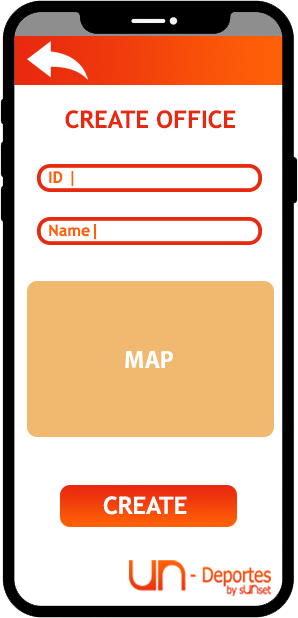
<style>
.page{position:relative;width:298px;height:618px;background:#ffffff}
.page>*{position:absolute;margin:0}
.t1{font:24px "TrebuchetMS-Bold";color:#e9290f}
.t2{font:16px "TrebuchetMS-Bold";color:#ff6107}
.t3{font:24px "MyriadPro-Bold";color:#ffffff}
.t4{font:24px "TrebuchetMS-Bold";color:#ffffff}
</style>
<div class="page">
<p class="t1" style="left:65px;top:110px;width:171px;height:19px">CREATE OFFICE</p>
<p class="t2" style="left:49px;top:171px;width:25px;height:16px">ID |</p>
<p class="t2" style="left:49px;top:224px;width:47px;height:16px">Name|</p>
<p class="t3" style="left:125px;top:351px;width:48px;height:17px">MAP</p>
<p class="t4" style="left:103px;top:496px;width:84px;height:19px">CREATE</p>
</div>
